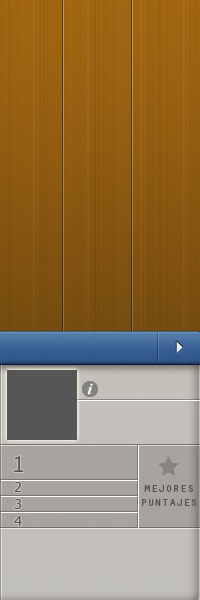
<style>
.page{position:relative;width:200px;height:600px}
.page>*{position:absolute;margin:0}
.t1{font:24px "OratorStd";color:#565656}
.t2{font:14px "Tahoma";color:#565656}
.t3{font:12px "OratorStd";color:#565656}
</style>
<div class="page">
<p class="t1" style="left:14px;top:456px;width:10px;height:16px">1</p>
<p class="t2" style="left:14px;top:482px;width:8px;height:44px;text-align:center">2<br>3<br>4</p>
<p class="t3" style="left:142px;top:485px;width:55px;height:21px;text-align:center">mejores<br>puntajes</p>
</div>
